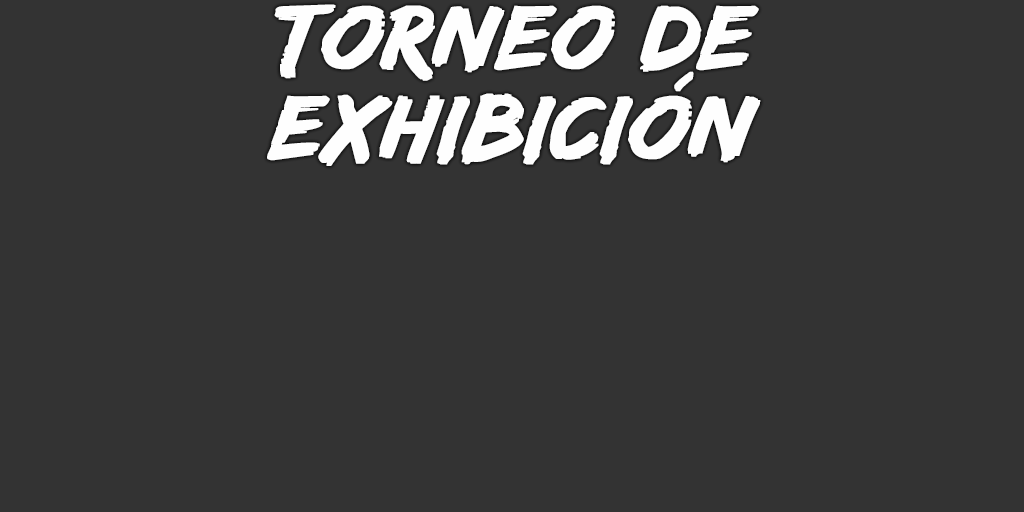
<style>
.page{position:relative;width:1024px;height:512px;background:#333333}
.page>*{position:absolute;margin:0}
.t1{font:94px/90px "EdoSZ";color:#fefefe;font-weight:bold;font-style:italic;scale:1.04 1}
</style>
<div class="page">
<p class="t1" style="left:267px;top:4px;width:494px;height:162px;text-align:center">torneo de<br>exhibición</p>
</div>
